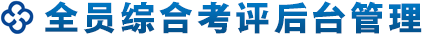
<style>
.page{position:relative;width:426px;height:34px;background:#ffffff}
.page>*{position:absolute;margin:0}
.t1{font:35.4px "FZYDCHK--GBK1-0";letter-spacing:0.1em;color:#0264a8}
</style>
<div class="page">
<p class="t1" style="left:44px;top:1px;width:378px;height:33px">全员综合考评后台管理</p>
</div>
